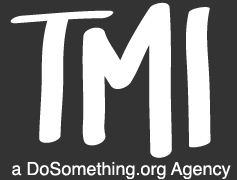
<style>
.page{position:relative;width:237px;height:180px;background:#333333}
.page>*{position:absolute;margin:0}
.t1{font:18px "Helvetica";color:#ffffff}
</style>
<div class="page">
<p class="t1" style="left:12px;top:161px;width:219px;height:18px">a DoSomething.org Agency</p>
</div>
